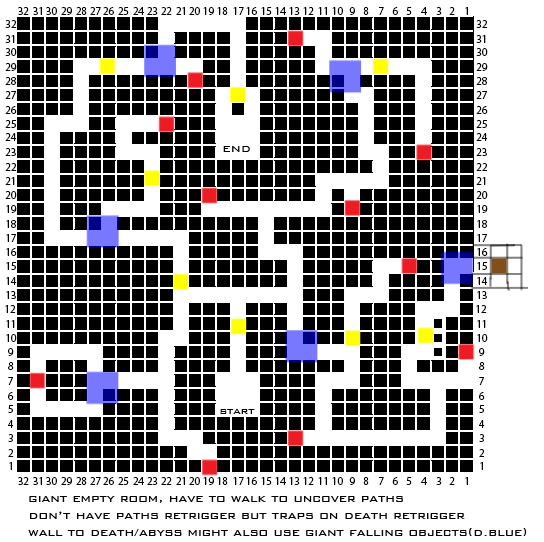
<style>
.page{position:relative;width:544px;height:542px;background:#ffffff}
.page>*{position:absolute;margin:0}
.t1{font:11px "MyriadPro-Regular";color:#000000}
.t2{font:12px "BankGothic-Light";color:#000000}
.t3{font:14px "BankGothic-Light";color:#000000}
</style>
<div class="page">
<p class="t1" style="left:18px;top:7px;width:11px;height:8px">32</p>
<p class="t1" style="left:33px;top:7px;width:9px;height:8px">31</p>
<p class="t1" style="left:46px;top:7px;width:11px;height:8px">30</p>
<p class="t1" style="left:61px;top:7px;width:11px;height:8px">29</p>
<p class="t1" style="left:76px;top:7px;width:11px;height:8px">28</p>
<p class="t1" style="left:90px;top:7px;width:11px;height:8px">27</p>
<p class="t1" style="left:103px;top:7px;width:11px;height:8px">26</p>
<p class="t1" style="left:118px;top:7px;width:11px;height:8px">25</p>
<p class="t1" style="left:133px;top:7px;width:11px;height:8px">24</p>
<p class="t1" style="left:147px;top:7px;width:11px;height:8px">23</p>
<p class="t1" style="left:161px;top:7px;width:11px;height:8px">22</p>
<p class="t1" style="left:176px;top:7px;width:9px;height:8px">21</p>
<p class="t1" style="left:189px;top:7px;width:11px;height:8px">20</p>
<p class="t1" style="left:203px;top:7px;width:11px;height:8px">19</p>
<p class="t1" style="left:217px;top:7px;width:11px;height:8px">18</p>
<p class="t1" style="left:233px;top:7px;width:11px;height:8px">17</p>
<p class="t1" style="left:246px;top:7px;width:11px;height:8px">16</p>
<p class="t1" style="left:261px;top:7px;width:11px;height:8px">15</p>
<p class="t1" style="left:275px;top:7px;width:11px;height:8px">14</p>
<p class="t1" style="left:289px;top:7px;width:11px;height:8px">13</p>
<p class="t1" style="left:303px;top:7px;width:11px;height:8px">12</p>
<p class="t1" style="left:318px;top:7px;width:9px;height:8px">11</p>
<p class="t1" style="left:332px;top:7px;width:11px;height:8px">10</p>
<p class="t1" style="left:349px;top:7px;width:6px;height:8px">9</p>
<p class="t1" style="left:363px;top:7px;width:6px;height:8px">8</p>
<p class="t1" style="left:379px;top:7px;width:5px;height:8px">7</p>
<p class="t1" style="left:392px;top:7px;width:6px;height:8px">6</p>
<p class="t1" style="left:406px;top:7px;width:6px;height:8px">5</p>
<p class="t1" style="left:421px;top:7px;width:6px;height:8px">4</p>
<p class="t1" style="left:436px;top:7px;width:6px;height:8px">3</p>
<p class="t1" style="left:449px;top:7px;width:6px;height:8px">2</p>
<p class="t1" style="left:465px;top:7px;width:3px;height:8px">1</p>
<p class="t1" style="left:5px;top:20px;width:12px;height:8px">32</p>
<p class="t1" style="left:476px;top:20px;width:12px;height:8px">32</p>
<p class="t1" style="left:5px;top:35px;width:10px;height:8px">31</p>
<p class="t1" style="left:476px;top:35px;width:10px;height:8px">31</p>
<p class="t1" style="left:5px;top:48px;width:12px;height:8px">30</p>
<p class="t1" style="left:476px;top:48px;width:12px;height:8px">30</p>
<p class="t1" style="left:5px;top:63px;width:12px;height:8px">29</p>
<p class="t1" style="left:476px;top:63px;width:12px;height:8px">29</p>
<p class="t1" style="left:5px;top:77px;width:11px;height:8px">28</p>
<p class="t1" style="left:476px;top:77px;width:11px;height:8px">28</p>
<p class="t1" style="left:5px;top:91px;width:11px;height:8px">27</p>
<p class="t1" style="left:476px;top:91px;width:11px;height:8px">27</p>
<p class="t1" style="left:5px;top:106px;width:12px;height:8px">26</p>
<p class="t1" style="left:476px;top:106px;width:12px;height:8px">26</p>
<p class="t1" style="left:5px;top:120px;width:11px;height:8px">25</p>
<p class="t1" style="left:476px;top:120px;width:11px;height:8px">25</p>
<p class="t1" style="left:5px;top:133px;width:12px;height:8px">24</p>
<p class="t1" style="left:476px;top:133px;width:12px;height:8px">24</p>
<p class="t1" style="left:5px;top:148px;width:11px;height:8px">23</p>
<p class="t2" style="left:223px;top:146px;width:27px;height:6px">END</p>
<p class="t1" style="left:476px;top:148px;width:11px;height:8px">23</p>
<p class="t1" style="left:5px;top:163px;width:12px;height:8px">22</p>
<p class="t1" style="left:476px;top:163px;width:12px;height:8px">22</p>
<p class="t1" style="left:5px;top:177px;width:10px;height:8px">21</p>
<p class="t1" style="left:476px;top:177px;width:10px;height:8px">21</p>
<p class="t1" style="left:5px;top:191px;width:12px;height:8px">20</p>
<p class="t1" style="left:476px;top:191px;width:12px;height:8px">20</p>
<p class="t1" style="left:6px;top:205px;width:11px;height:8px">19</p>
<p class="t1" style="left:477px;top:205px;width:11px;height:8px">19</p>
<p class="t1" style="left:6px;top:220px;width:10px;height:8px">18</p>
<p class="t1" style="left:477px;top:220px;width:10px;height:8px">18</p>
<p class="t1" style="left:6px;top:234px;width:10px;height:8px">17</p>
<p class="t1" style="left:477px;top:234px;width:10px;height:8px">17</p>
<p class="t1" style="left:6px;top:248px;width:11px;height:8px">16</p>
<p class="t1" style="left:477px;top:248px;width:11px;height:8px">16</p>
<p class="t1" style="left:6px;top:262px;width:10px;height:8px">15</p>
<p class="t1" style="left:477px;top:262px;width:10px;height:8px">15</p>
<p class="t1" style="left:6px;top:277px;width:11px;height:8px">14</p>
<p class="t1" style="left:477px;top:277px;width:11px;height:8px">14</p>
<p class="t1" style="left:6px;top:291px;width:10px;height:8px">13</p>
<p class="t1" style="left:477px;top:291px;width:10px;height:8px">13</p>
<p class="t1" style="left:5px;top:305px;width:11px;height:8px">12</p>
<p class="t1" style="left:476px;top:305px;width:11px;height:8px">12</p>
<p class="t1" style="left:6px;top:320px;width:9px;height:8px">11</p>
<p class="t1" style="left:477px;top:320px;width:9px;height:8px">11</p>
<p class="t1" style="left:6px;top:334px;width:11px;height:8px">10</p>
<p class="t1" style="left:477px;top:334px;width:11px;height:8px">10</p>
<p class="t1" style="left:8px;top:348px;width:6px;height:8px">9</p>
<p class="t1" style="left:479px;top:348px;width:6px;height:8px">9</p>
<p class="t1" style="left:8px;top:362px;width:6px;height:8px">8</p>
<p class="t1" style="left:479px;top:362px;width:6px;height:8px">8</p>
<p class="t1" style="left:8px;top:377px;width:5px;height:8px">7</p>
<p class="t1" style="left:479px;top:377px;width:5px;height:8px">7</p>
<p class="t1" style="left:8px;top:392px;width:6px;height:8px">6</p>
<p class="t1" style="left:479px;top:392px;width:6px;height:8px">6</p>
<p class="t1" style="left:8px;top:405px;width:5px;height:8px">5</p>
<p class="t2" style="left:220px;top:409px;width:35px;height:5px">start</p>
<p class="t1" style="left:479px;top:405px;width:5px;height:8px">5</p>
<p class="t1" style="left:8px;top:420px;width:6px;height:8px">4</p>
<p class="t1" style="left:479px;top:420px;width:6px;height:8px">4</p>
<p class="t1" style="left:8px;top:434px;width:5px;height:8px">3</p>
<p class="t1" style="left:479px;top:434px;width:5px;height:8px">3</p>
<p class="t1" style="left:8px;top:449px;width:6px;height:8px">2</p>
<p class="t1" style="left:479px;top:449px;width:6px;height:8px">2</p>
<p class="t1" style="left:9px;top:462px;width:3px;height:8px">1</p>
<p class="t1" style="left:480px;top:462px;width:3px;height:8px">1</p>
<p class="t1" style="left:18px;top:477px;width:11px;height:8px">32</p>
<p class="t1" style="left:33px;top:477px;width:9px;height:8px">31</p>
<p class="t1" style="left:46px;top:477px;width:11px;height:8px">30</p>
<p class="t1" style="left:61px;top:477px;width:11px;height:8px">29</p>
<p class="t1" style="left:76px;top:477px;width:11px;height:8px">28</p>
<p class="t1" style="left:90px;top:477px;width:11px;height:8px">27</p>
<p class="t1" style="left:103px;top:477px;width:11px;height:8px">26</p>
<p class="t1" style="left:118px;top:477px;width:11px;height:8px">25</p>
<p class="t1" style="left:133px;top:477px;width:11px;height:8px">24</p>
<p class="t1" style="left:147px;top:477px;width:11px;height:8px">23</p>
<p class="t1" style="left:161px;top:477px;width:11px;height:8px">22</p>
<p class="t1" style="left:176px;top:477px;width:9px;height:8px">21</p>
<p class="t1" style="left:189px;top:477px;width:11px;height:8px">20</p>
<p class="t1" style="left:203px;top:477px;width:11px;height:8px">19</p>
<p class="t1" style="left:217px;top:477px;width:11px;height:8px">18</p>
<p class="t1" style="left:233px;top:477px;width:11px;height:8px">17</p>
<p class="t1" style="left:246px;top:477px;width:11px;height:8px">16</p>
<p class="t1" style="left:261px;top:477px;width:11px;height:8px">15</p>
<p class="t1" style="left:275px;top:477px;width:11px;height:8px">14</p>
<p class="t1" style="left:289px;top:477px;width:11px;height:8px">13</p>
<p class="t1" style="left:303px;top:477px;width:11px;height:8px">12</p>
<p class="t1" style="left:318px;top:477px;width:9px;height:8px">11</p>
<p class="t1" style="left:332px;top:477px;width:11px;height:8px">10</p>
<p class="t1" style="left:349px;top:477px;width:6px;height:8px">9</p>
<p class="t1" style="left:363px;top:477px;width:6px;height:8px">8</p>
<p class="t1" style="left:379px;top:477px;width:5px;height:8px">7</p>
<p class="t1" style="left:392px;top:477px;width:6px;height:8px">6</p>
<p class="t1" style="left:406px;top:477px;width:6px;height:8px">5</p>
<p class="t1" style="left:421px;top:477px;width:6px;height:8px">4</p>
<p class="t1" style="left:436px;top:477px;width:6px;height:8px">3</p>
<p class="t1" style="left:449px;top:477px;width:6px;height:8px">2</p>
<p class="t1" style="left:465px;top:477px;width:3px;height:8px">1</p>
<p class="t3" style="left:28px;top:496px;width:499px;height:40px">giant empty room, have to walk to uncover paths<br>don’t have paths retrigger but traps on death retrigger<br>wall to death/abyss might also use giant falling objects(d.blue)</p>
</div>
